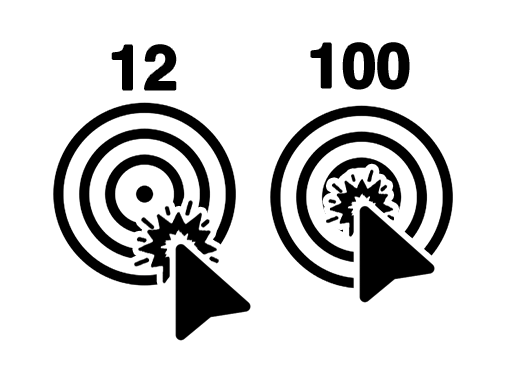
<style>
.page{position:relative;width:512px;height:366px;background:#ffffff}
.page>*{position:absolute;margin:0}
.t1{font:62px "Helvetica-Bold";color:#000000}
</style>
<div class="page">
<p class="t1" style="left:112px;top:45px;width:64px;height:45px">12</p>
<p class="t1" style="left:311px;top:43px;width:98px;height:46px">100</p>
</div>
